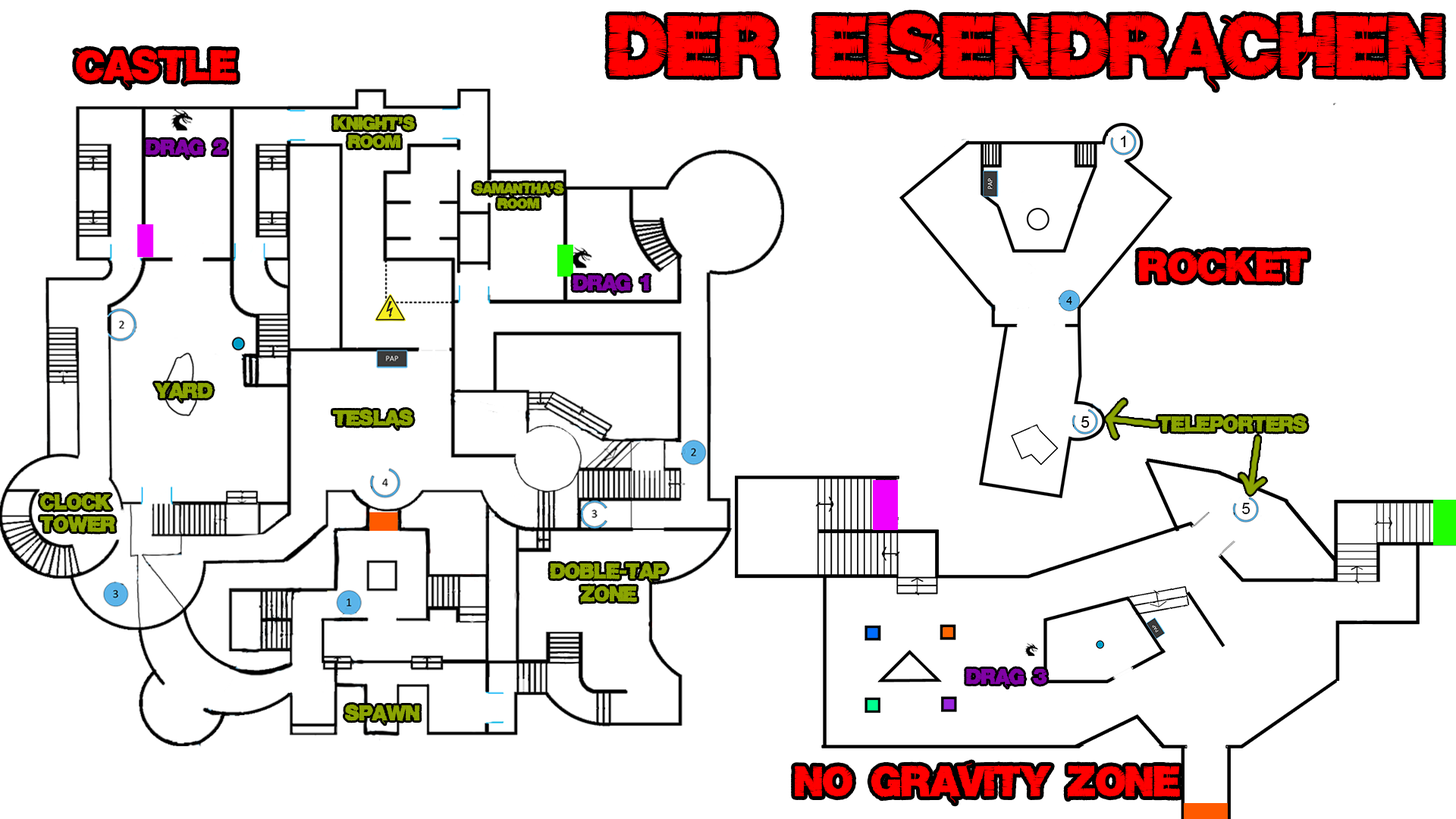
<style>
.page{position:relative;width:1456px;height:819px;background:#ffffff}
.page>*{position:absolute;margin:0}
.t1{font:75.8px "Base05";color:#ff0000}
.t2{font:37.9px "Base05";color:#ff0000}
.t3{font:15.8px "Base05";color:#8ba403}
.t4{font:19px "Base05";color:#8003a4}
.t5{font:12.6px "Base05";color:#8ba403}
.t6{font:19px "Base05";color:#8ba403}
</style>
<div class="page">
<p class="t1" style="left:608px;top:13px;width:834px;height:76px">Der Eisendrachen</p>
<p class="t2" style="left:76px;top:49px;width:161px;height:38px">Castle</p>
<p class="t3" style="left:333px;top:116px;width:82px;height:33px;text-align:center">Knight's<br>room</p>
<p class="t4" style="left:146px;top:139px;width:81px;height:19px">Drag 2</p>
<p class="t5" style="left:473px;top:182px;width:91px;height:27px;text-align:center">Samantha's<br>room</p>
<p class="t2" style="left:1138px;top:250px;width:169px;height:32px">rocket</p>
<p class="t4" style="left:573px;top:275px;width:77px;height:19px">Drag 1</p>
<p class="t6" style="left:155px;top:383px;width:58px;height:19px">yard</p>
<p class="t6" style="left:333px;top:409px;width:80px;height:20px">Teslas</p>
<p class="t6" style="left:1158px;top:416px;width:149px;height:16px">teleporters</p>
<p class="t6" style="left:39px;top:494px;width:76px;height:38px">Clock<br>Tower</p>
<p class="t6" style="left:550px;top:563px;width:117px;height:40px;text-align:center">Doble-Tap<br>zone</p>
<p class="t4" style="left:966px;top:668px;width:81px;height:20px">Drag 3</p>
<p class="t6" style="left:345px;top:704px;width:75px;height:20px">sPAWN</p>
<p class="t2" style="left:795px;top:763px;width:385px;height:40px">No gravity zone</p>
</div>
